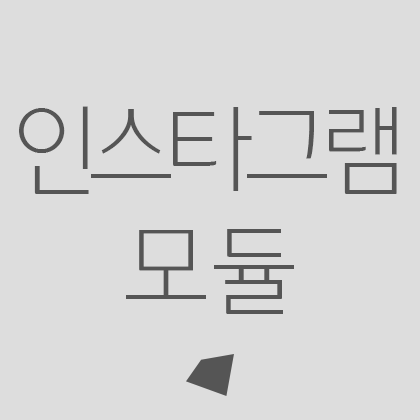
<style>
.page{position:relative;width:420px;height:420px;background:#dddddd}
.page>*{position:absolute;margin:0}
.t1{font:100px "YDotum110";letter-spacing:-0.1em;color:#555555}
.t2{font:100px "YDotum110";color:#555555}
</style>
<div class="page">
<p class="t1" style="left:19px;top:106px;width:378px;height:208px;text-align:center">인스타그램<br><span class="t2">모듈</span></p>
</div>
